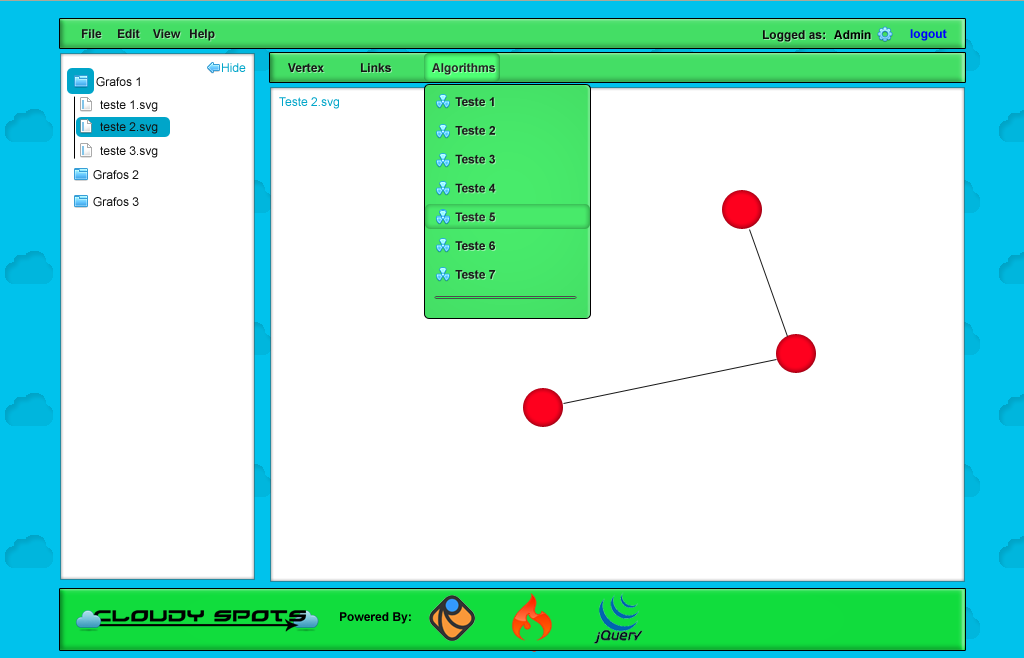
<style>
.page{position:relative;width:1024px;height:658px;background:#ffffff}
.page>*{position:absolute;margin:0}
.t1{font:12px "Arial-BoldMT";color:#292929}
.t2{font:12px "Arial-BoldMT";color:#1a1a1a}
.t3{font:12px "Arial-BoldMT";color:#000000}
.t4{font:12px "Arial-BoldMT";color:#0000ff}
.t5{font:12px "ArialMT";color:#00a5c9}
.t6{font:12px "Arial-BoldMT";color:#434343}
.t7{font:12px "ArialMT";color:#121212}
.t8{font:12px "Arial-BoldMT";color:#303030}
</style>
<div class="page">
<p class="t1" style="left:82px;top:29px;width:133px;height:12px">File Edit View Help</p>
<p class="t2" style="left:763px;top:30px;width:108px;height:12px">Logged as: <span class="t3">Admin</span></p>
<p class="t4" style="left:910px;top:29px;width:37px;height:12px">logout</p>
<p class="t5" style="left:222px;top:63px;width:24px;height:9px">Hide</p>
<p class="t1" style="left:288px;top:63px;width:207px;height:12px">Vertex Links  <span class="t6">Algorithms</span></p>
<p class="t7" style="left:96px;top:77px;width:44px;height:10px">Grafos 1</p>
<p class="t7" style="left:100px;top:100px;width:58px;height:12px">teste 1.svg</p>
<p class="t5" style="left:279px;top:97px;width:60px;height:12px">Teste 2.svg</p>
<p class="t8" style="left:455px;top:97px;width:41px;height:182px">Teste 1<br><br>Teste 2<br><br>Teste 3<br><br>Teste 4<br><br><span class="t6">Teste 5<br></span><br>Teste 6<br><br>Teste 7</p>
<p class="t7" style="left:100px;top:122px;width:58px;height:12px">teste 2.svg</p>
<p class="t7" style="left:100px;top:146px;width:58px;height:12px">teste 3.svg</p>
<p class="t7" style="left:93px;top:170px;width:46px;height:10px">Grafos 2</p>
<p class="t7" style="left:93px;top:197px;width:46px;height:10px">Grafos 3</p>
<p class="t3" style="left:340px;top:612px;width:71px;height:12px">Powered By:</p>
</div>
